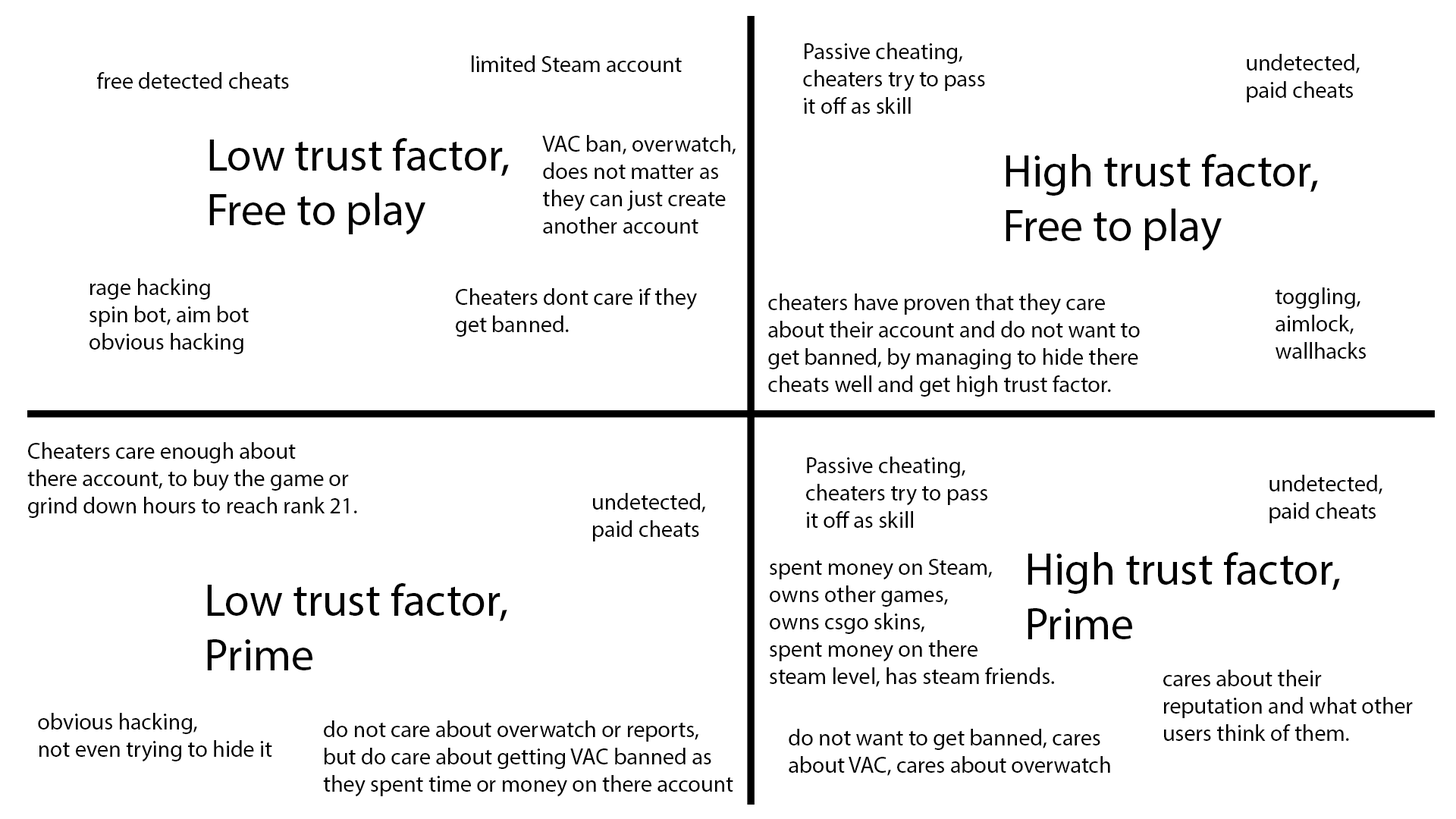
<style>
.page{position:relative;width:1456px;height:819px;background:#ffffff}
.page>*{position:absolute;margin:0}
.t1{font:22.7px "MyriadPro-Regular";color:#000000}
.t2{font:45.5px "MyriadPro-Regular";color:#000000}
</style>
<div class="page">
<p class="t1" style="left:803px;top:42px;width:182px;height:72px">Passive cheating,<br>cheaters try to pass <br>it off as skill</p>
<p class="t1" style="left:1247px;top:54px;width:113px;height:48px">undetected,<br>paid cheats</p>
<p class="t1" style="left:472px;top:55px;width:210px;height:17px">limited Steam account</p>
<p class="t1" style="left:97px;top:72px;width:192px;height:17px">free detected cheats</p>
<p class="t1" style="left:542px;top:135px;width:194px;height:99px">VAC ban, overwatch,<br>does not matter as <br>they can just create <br>another account</p>
<p class="t2" style="left:209px;top:138px;width:300px;height:97px">Low trust factor,<br>Free to play</p>
<p class="t2" style="left:1006px;top:154px;width:312px;height:97px">High trust factor,<br>Free to play</p>
<p class="t1" style="left:89px;top:278px;width:160px;height:76px">rage hacking<br>spin bot, aim bot<br>obvious hacking</p>
<p class="t1" style="left:456px;top:288px;width:241px;height:49px">Cheaters dont care if they <br>get banned.</p>
<p class="t1" style="left:768px;top:293px;width:372px;height:104px">cheaters have proven that they care <br>about their account and do not want to <br>get banned, by managing to hide there <br>cheats well and get high trust factor.</p>
<p class="t1" style="left:1275px;top:287px;width:91px;height:72px">toggling,<br>aimlock,<br>wallhacks</p>
<p class="t1" style="left:27px;top:442px;width:330px;height:76px">Cheaters care enough about <br>there account, to buy the game or <br>grind down hours to reach rank 21.</p>
<p class="t1" style="left:806px;top:457px;width:181px;height:71px">Passive cheating,<br>cheaters try to pass<br>it off as skill</p>
<p class="t1" style="left:1269px;top:475px;width:113px;height:48px">undetected,<br>paid cheats</p>
<p class="t1" style="left:593px;top:493px;width:112px;height:48px">undetected,<br>paid cheats</p>
<p class="t2" style="left:1028px;top:552px;width:312px;height:87px">High trust factor,<br>Prime</p>
<p class="t1" style="left:770px;top:559px;width:284px;height:128px">spent money on Steam,<br>owns other games,<br>owns csgo skins,<br>spent money on there <br>steam level, has steam friends.</p>
<p class="t2" style="left:207px;top:583px;width:300px;height:87px">Low trust factor,<br>Prime</p>
<p class="t1" style="left:1163px;top:670px;width:250px;height:71px">cares about their <br>reputation and what other <br>users think of them.</p>
<p class="t1" style="left:38px;top:713px;width:234px;height:49px">obvious hacking,<br>not even trying to hide it</p>
<p class="t1" style="left:323px;top:720px;width:410px;height:77px">do not care about overwatch or reports,<br>but do care about getting VAC banned as<br>they spent time or money on there account</p>
<p class="t1" style="left:789px;top:729px;width:321px;height:47px">do not want to get banned, cares <br>about VAC, cares about overwatch</p>
</div>
